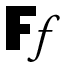
<style>
.page{position:relative;width:64px;height:64px;background:#ffffff}
.page>*{position:absolute;margin:0}
.t1{font:48px "AGaramondPro-Italic";color:#000000}
</style>
<div class="page">
<p class="t1" style="left:27px;top:14px;width:33px;height:48px">f</p>
</div>
